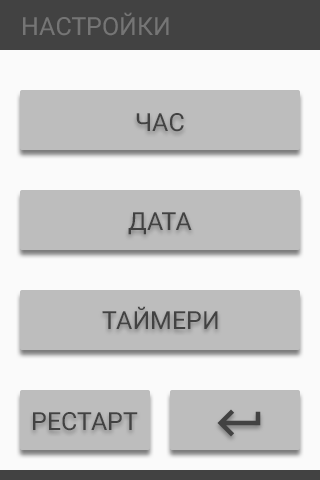
<style>
.page{position:relative;width:320px;height:480px;background:#bdbdbd}
.page>*{position:absolute;margin:0}
.t1{font:25px "Roboto-Regular";color:#757575}
.t2{font:25px "Roboto-Regular";color:#424242}
</style>
<div class="page">
<p class="t1" style="left:23px;top:12px;width:146px;height:24px">НАСТРОЙКИ</p>
<p class="t2" style="left:136px;top:113px;width:48px;height:19px">ЧАС</p>
<p class="t2" style="left:128px;top:212px;width:64px;height:23px">ДАТА</p>
<p class="t2" style="left:102px;top:306px;width:116px;height:23px">ТАЙМЕРИ</p>
<p class="t2" style="left:33px;top:412px;width:105px;height:19px">РЕСТАРТ</p>
</div>
